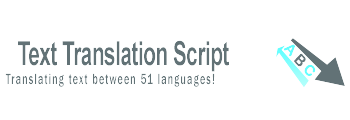
<style>
.page{position:relative;width:350px;height:120px;background:#ffffff}
.page>*{position:absolute;margin:0}
.t1{font:32.9px "Arial-BoldMT";letter-spacing:-0.025em;color:#465255;scale:0.63 1}
.t2{font:14.9px "ArialRoundedMTBold";letter-spacing:0.2em;color:#64ffff;font-weight:bold}
.t3{font:14.9px "ArialRoundedMTBold";letter-spacing:0.2em;color:#475356;font-weight:bold}
.t4{font:14.9px "ArialRoundedMTBold";letter-spacing:0.2em;color:#63ffff;font-weight:bold}
.t5{font:15.5px "FranklinGothic-Medium";letter-spacing:0.1em;color:#465255;scale:0.66 1}
</style>
<div class="page">
<p class="t1" style="left:18px;top:40px;width:211px;height:32px">Text Translation Script</p>
<p class="t2" style="left:284px;top:44px;width:32px;height:32px;rotate:48deg">A<span class="t3">B</span><span class="t4">C</span></p>
<p class="t5" style="left:5px;top:73px;width:210px;height:14px">Translating text between 51 languages!</p>
</div>
